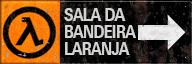
<style>
.page{position:relative;width:192px;height:64px}
.page>*{position:absolute;margin:0}
.t1{font:18px/17px "UniversNextPro-Bold";letter-spacing:-0.02em;color:#d3d3d2;scale:0.75 1}
</style>
<div class="page">
<p class="t1" style="left:64px;top:8px;width:72px;height:47px">SALA DA<br>BANDEIRA<br>LARANJA</p>
</div>
